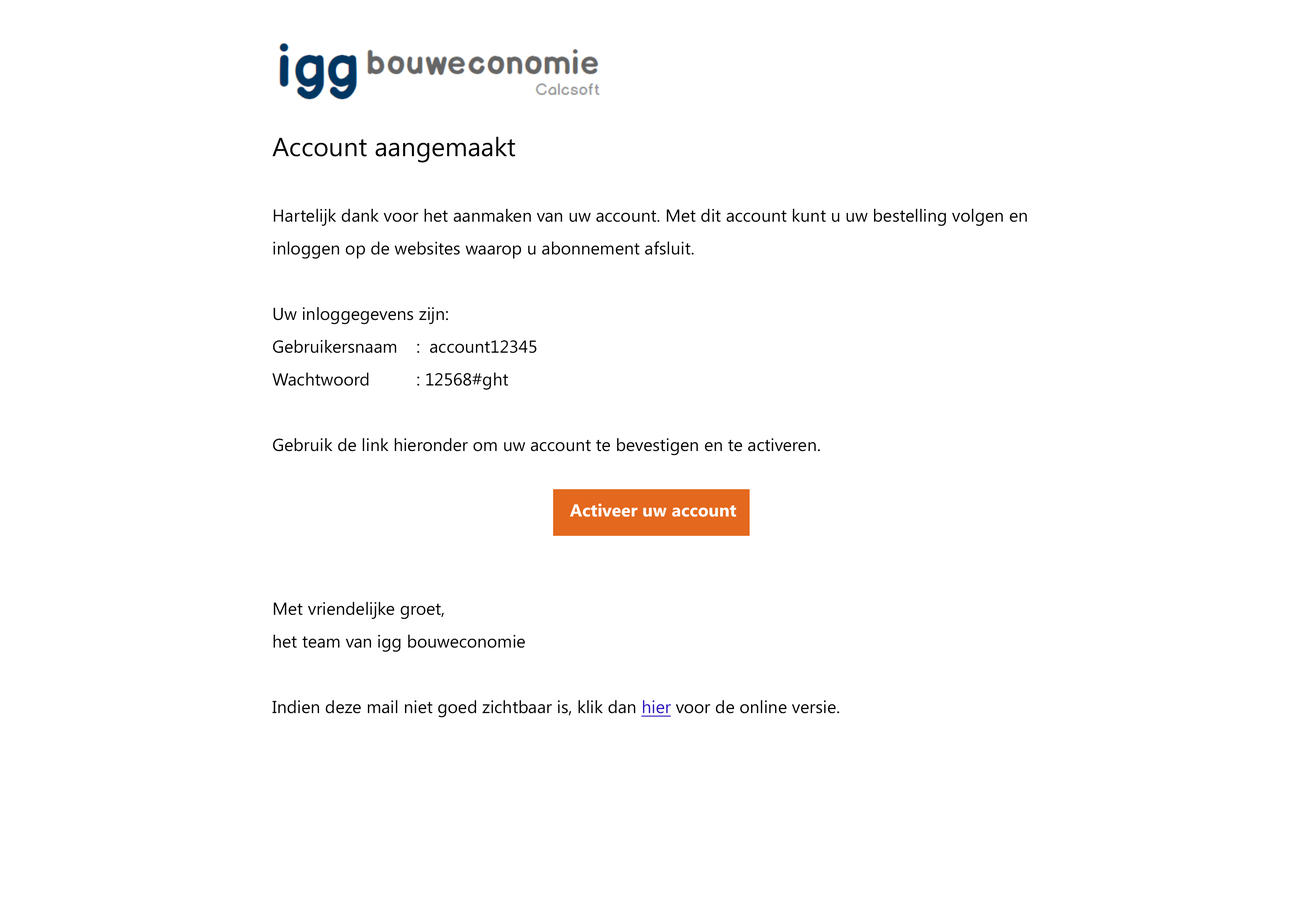
<style>
.page{position:relative;width:1310px;height:910px;background:#ffffff}
.page>*{position:absolute;margin:0}
.t1{font:17.5px/32.8px "SegoeUI";color:#000000}
.t2{font:26.2px/32.8px "SegoeUI";color:#000000}
.t3{font:17.5px/32.8px "SegoeUI-Bold";color:#ffffff}
.t4{font:17.5px/32.8px "SegoeUI";color:#2b13be;text-decoration:underline}
</style>
<div class="page">
<p class="t1" style="left:272px;top:136px;width:755px;height:581px"><span class="t2">Account aangemaakt<br></span><br>Hartelijk dank voor het aanmaken van uw account. Met dit account kunt u uw bestelling volgen en inloggen op de websites waarop u abonnement afsluit. <br><br>Uw inloggegevens zijn:<br>Gebruikersnaam  :  account12345<br>Wachtwoord    : 12568#ght<br><br>Gebruik de link hieronder om uw account te bevestigen en te activeren.<br><br>                        <span class="t3">Activeer uw account<br></span><br><br>Met vriendelijke groet,<br>het team van igg bouweconomie<br><br>Indien deze mail niet goed zichtbaar is, klik dan <span class="t4">hier</span> voor de online versie.</p>
</div>
